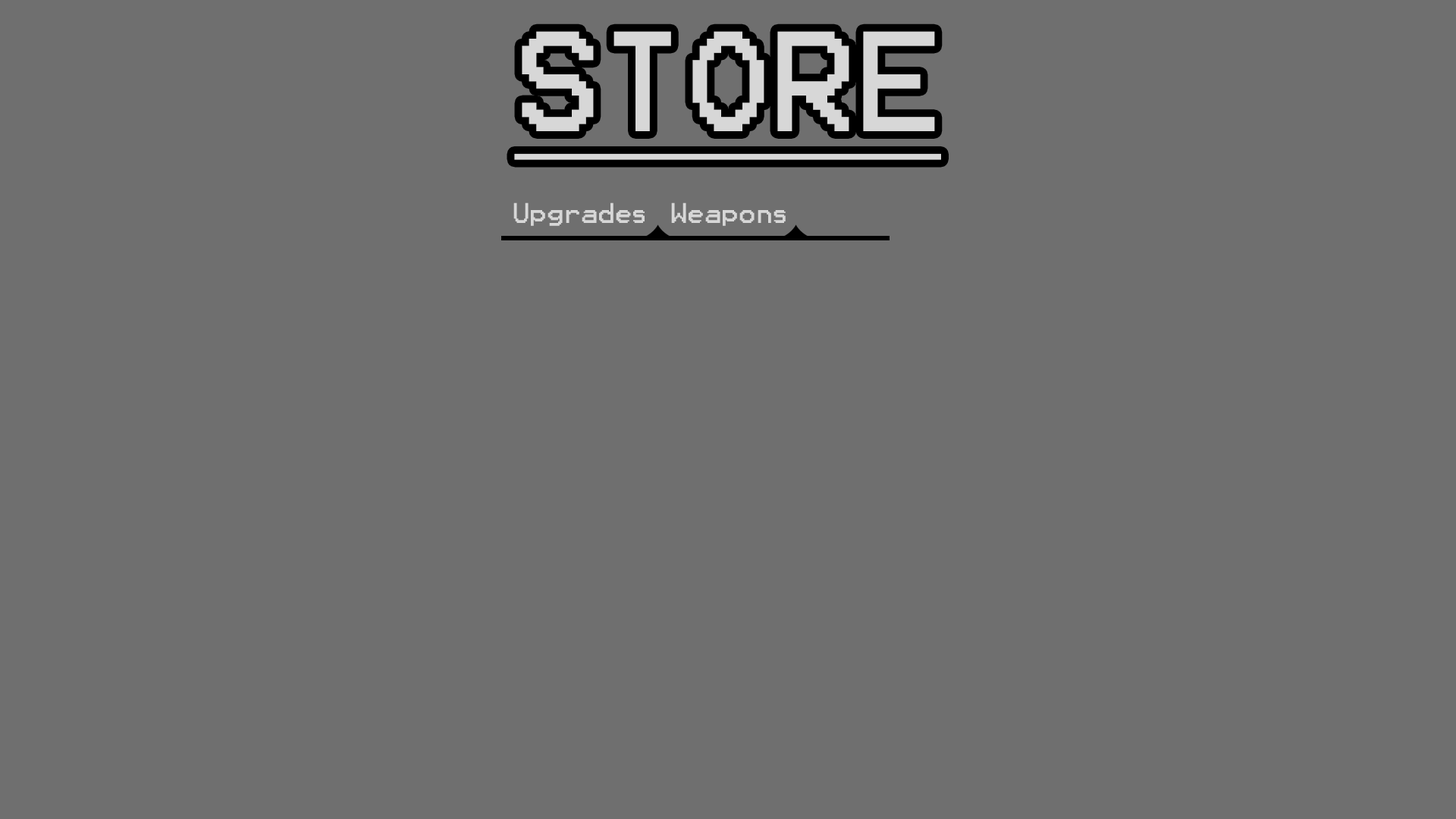
<style>
.page{position:relative;width:1456px;height:819px;background:#6f6f6f}
.page>*{position:absolute;margin:0}
.t1{font:113.7px "Terminal";color:#d7d7d7;text-decoration:underline}
.t2{font:22.7px "Terminal";color:#d7d7d7}
</style>
<div class="page">
<p class="t1" style="left:514px;top:31px;width:427px;height:129px">STORE</p>
<p class="t2" style="left:513px;top:202px;width:132px;height:24px">Upgrades</p>
<p class="t2" style="left:671px;top:202px;width:115px;height:24px">Weapons</p>
</div>
